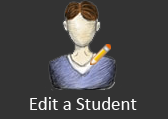
<style>
.page{position:relative;width:168px;height:119px;background:#333333}
.page>*{position:absolute;margin:0}
.t1{font:19px "Calibri";color:#fcfcfc}
</style>
<div class="page">
<p class="t1" style="left:30px;top:97px;width:107px;height:13px">Edit a Student</p>
</div>
